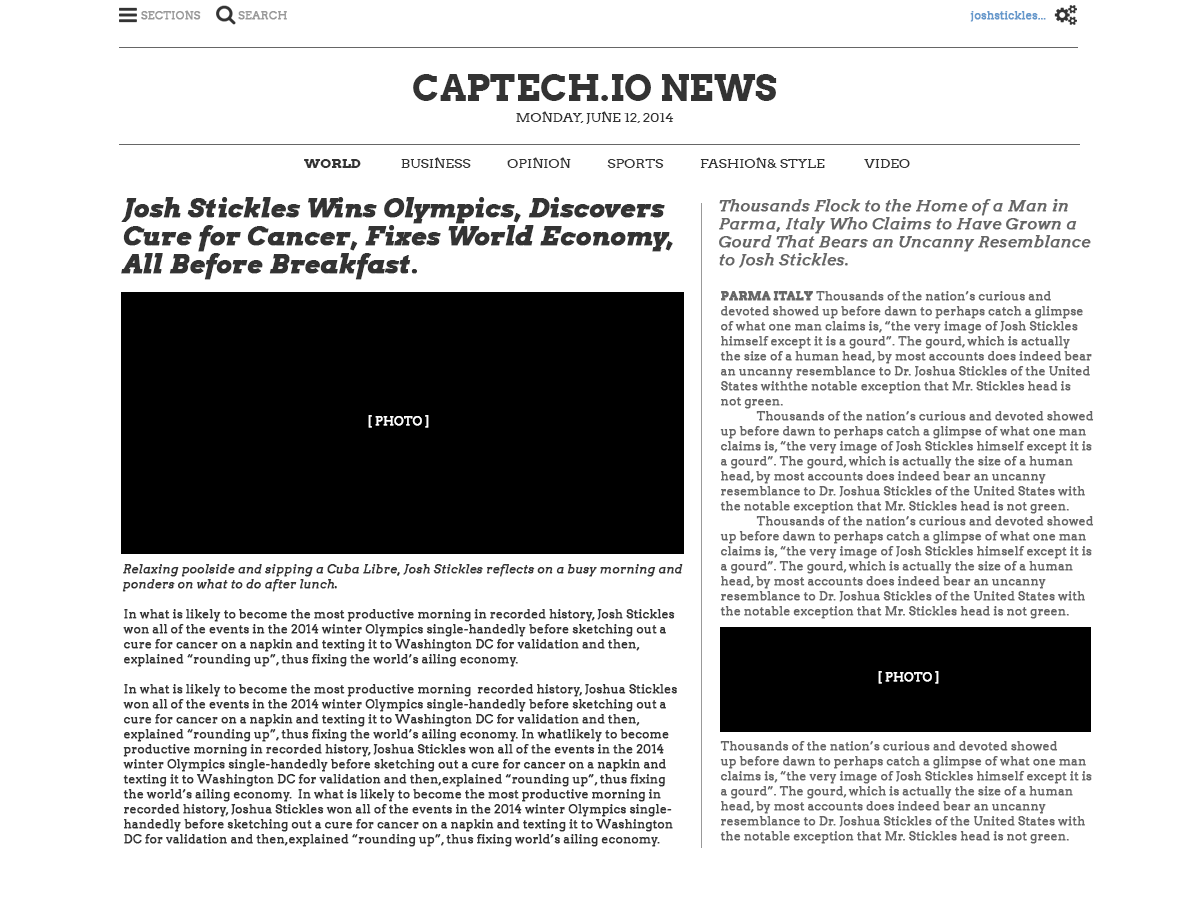
<style>
.page{position:relative;width:1200px;height:900px;background:#ffffff}
.page>*{position:absolute;margin:0}
.t1{font:11px "Arvo";color:#999999;font-weight:bold}
.t2{font:11px "Arvo";color:#6699cc;font-weight:bold}
.t3{font:36px "Arvo-Bold";color:#333333;text-transform:uppercase}
.t4{font:14px "Arvo";color:#333333;text-transform:uppercase}
.t5{font:14px "Arvo-Bold";color:#333333;text-transform:uppercase}
.t6{font:26px/28px "Arvo-BoldItalic";color:#333333;font-weight:bold}
.t7{font:16px/18px "Arvo-Italic";color:#666666;font-weight:bold}
.t8{font:12px "Arvo";color:#ffffff;font-weight:bold}
.t9{font:12px/15px "Arvo-Italic";color:#333333;font-weight:bold}
.t10{font:12px/15px "Arvo";color:#333333;font-weight:bold}
</style>
<div class="page">
<p class="t1" style="left:141px;top:10px;width:146px;height:10px">SECTIONS              SEARCH</p>
<p class="t2" style="left:970px;top:11px;width:76px;height:11px">joshstickles...</p>
<p class="t3" style="left:413px;top:74px;width:364px;height:27px">captech.io news</p>
<p class="t4" style="left:516px;top:111px;width:158px;height:13px">Monday, June 12, 2014</p>
<p class="t4" style="left:304px;top:157px;width:606px;height:11px"><span class="t5">WORLD             </span>BUSINESS            OPINION            SPORTS            FASHION&amp; STYLE             VIDEO</p>
<p class="t6" style="left:121px;top:197px;width:552px;height:83px">Josh Stickles Wins Olympics, Discovers <br>Cure for Cancer, Fixes World Economy, <br>All Before Breakfast.</p>
<p class="t7" style="left:719px;top:199px;width:372px;height:69px">Thousands Flock to the Home of a Man in <br>Parma, Italy Who Claims to Have Grown a <br>Gourd That Bears an Uncanny Resemblance <br>to Josh Stickles.</p>
<p class="t8" style="left:368px;top:415px;width:61px;height:13px">[ PHOTO ]</p>
<p class="t9" style="left:122px;top:564px;width:561px;height:28px">Relaxing poolside and sipping a Cuba Libre, Josh Stickles reflects on a busy morning and<br>ponders on what to do after lunch.</p>
<p class="t10" style="left:123px;top:609px;width:554px;height:238px">In what is likely to become the most productive morning in recorded history, Josh Stickles <br>won all of the events in the 2014 winter Olympics single-handedly before sketching out a <br>cure for cancer on a napkin and texting it to Washington DC for validation and then,<br>explained “rounding up”, thus fixing the world’s ailing economy. <br><br>In what is likely to become the most productive morning  recorded history, Joshua Stickles <br>won all of the events in the 2014 winter Olympics single-handedly before sketching out a <br>cure for cancer on a napkin and texting it to Washington DC for validation and then,<br>explained “rounding up”, thus fixing the world’s ailing economy. In whatlikely to become <br>productive morning in recorded history, Joshua Stickles won all of the events in the 2014 <br>winter Olympics single-handedly before sketching out a cure for cancer on a napkin and <br>texting it to Washington DC for validation and then,explained “rounding up”, thus fixing <br>the world’s ailing economy.  In what is likely to become the most productive morning in <br>recorded history, Joshua Stickles won all of the events in the 2014 winter Olympics single-<br>handedly before sketching out a cure for cancer on a napkin and texting it to Washington <br>DC for validation and then,explained “rounding up”, thus fixing world’s ailing economy.</p>
<p class="t8" style="left:878px;top:671px;width:61px;height:13px">[ PHOTO ]</p>
</div>
